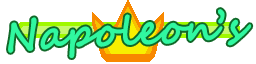
<style>
.page{position:relative;width:256px;height:64px;background:#ffffff}
.page>*{position:absolute;margin:0}
.t1{font:39.8px "SegoeScript";color:#30f8a0;font-weight:bold}
</style>
<div class="page">
<p class="t1" style="left:8px;top:9px;width:244px;height:49px;rotate:-2deg">Napoleon’s</p>
</div>
